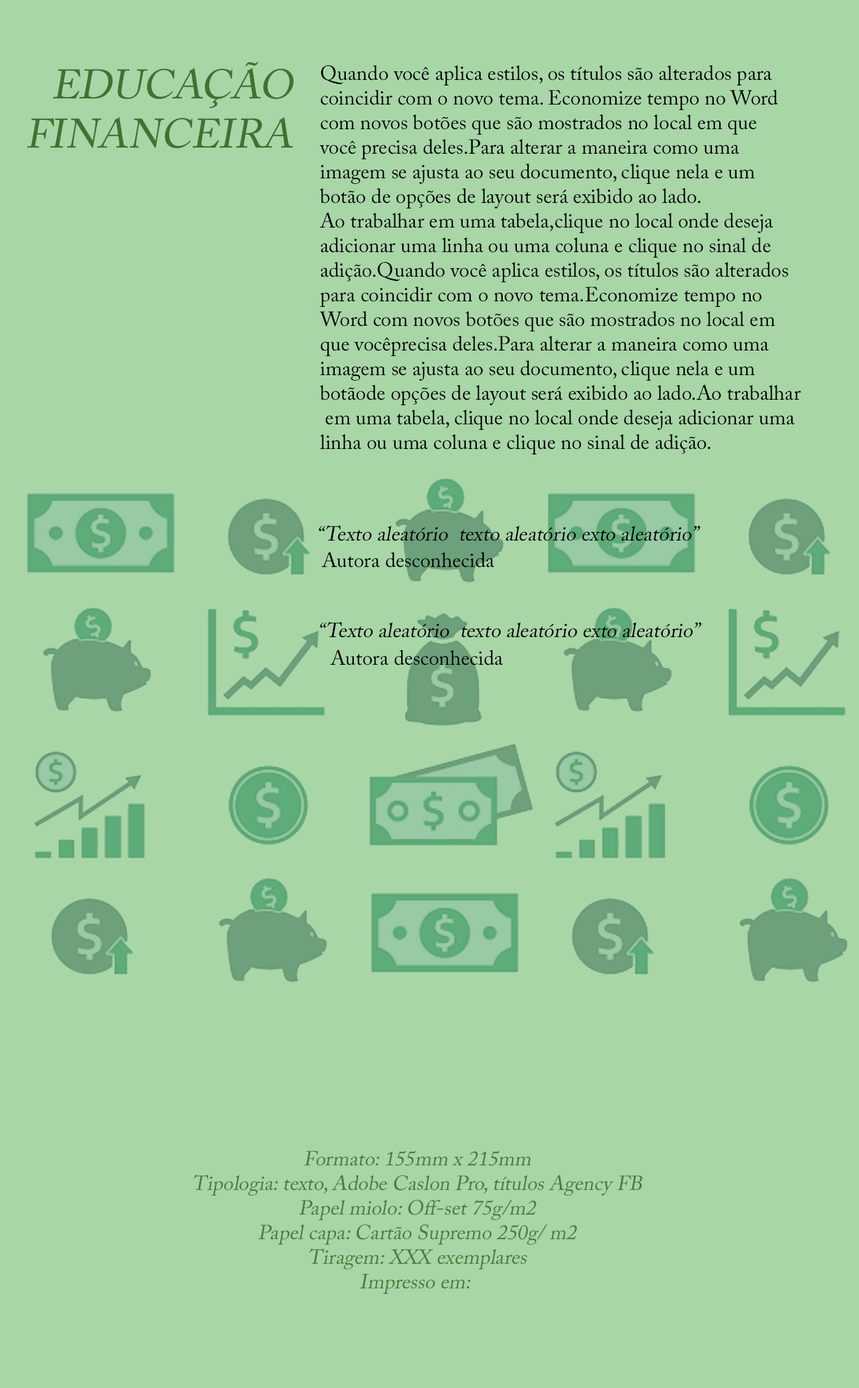
<style>
.page{position:relative;width:859px;height:1388px;background:#a8d6a7}
.page>*{position:absolute;margin:0}
.t1{font:41px "ACaslonPro-Regular";color:#40732f;font-style:italic}
.t2{font:20.5px "ACaslonPro-Regular";color:#000000}
.t3{font:20.5px "ACaslonPro-Regular";color:#000000;font-style:italic}
.t4{font:20.5px "ACaslonPro-Regular";color:#4b7d3b;font-style:italic}
</style>
<div class="page">
<p class="t1" style="left:27px;top:62px;width:266px;height:86px;text-align:right">EDUCAÇÃO<br>FINANCEIRA</p>
<p class="t2" style="left:319px;top:65px;width:482px;height:390px">Quando você aplica estilos, os títulos são alterados para <br>coincidir com o novo tema. Economize tempo no Word <br>com novos botões que são mostrados no local em que <br>você precisa deles.Para alterar a maneira como uma <br>imagem se ajusta ao seu documento, clique nela e um <br>botão de opções de layout será exibido ao lado. <br>Ao trabalhar em uma tabela,clique no local onde deseja<br>adicionar uma linha ou uma coluna e clique no sinal de <br>adição.Quando você aplica estilos, os títulos são alterados <br>para coincidir com o novo tema.Economize tempo no <br>Word com novos botões que são mostrados no local em <br>que vocêprecisa deles.Para alterar a maneira como uma <br>imagem se ajusta ao seu documento, clique nela e um <br>botãode opções de layout será exibido ao lado.Ao trabalhar<br> em uma tabela, clique no local onde deseja adicionar uma <br>linha ou uma coluna e clique no sinal de adição.</p>
<p class="t3" style="left:319px;top:525px;width:381px;height:16px">“Texto aleatório  texto aleatório exto aleatório”</p>
<p class="t2" style="left:322px;top:552px;width:173px;height:16px">Autora desconhecida</p>
<p class="t3" style="left:320px;top:622px;width:381px;height:16px">“Texto aleatório  texto aleatório exto aleatório”</p>
<p class="t2" style="left:330px;top:650px;width:173px;height:16px">Autora desconhecida</p>
<p class="t4" style="left:194px;top:1151px;width:448px;height:143px;text-align:center">Formato: 155mm x 215mm<br>Tipologia: texto, Adobe Caslon Pro, títulos Agency FB<br>Papel miolo: Off-set 75g/m2<br>Papel capa: Cartão Supremo 250g/ m2<br>Tiragem: XXX exemplares<br>Impresso em:</p>
</div>
